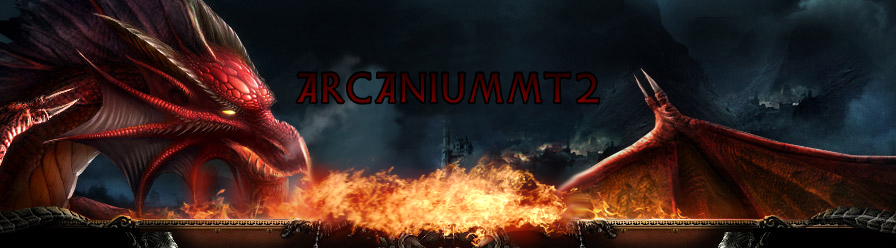
<style>
.page{position:relative;width:896px;height:248px}
.page>*{position:absolute;margin:0}
.t1{font:36px "WeissInitialenAlternates";letter-spacing:0.1em;font-weight:bold}
</style>
<div class="page">
<p class="t1" style="left:297px;top:73px;width:302px;height:30px">ArcaniumMT2</p>
</div>
